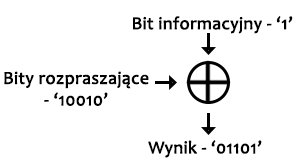
<style>
.page{position:relative;width:297px;height:167px;background:#ffffff}
.page>*{position:absolute;margin:0}
.t1{font:18px "Candara";color:#000000;font-weight:bold}
</style>
<div class="page">
<p class="t1" style="left:133px;top:16px;width:160px;height:18px">Bit informacyjny - ‘1’</p>
<p class="t1" style="left:4px;top:71px;width:145px;height:35px;text-align:center">Bity rozpraszające<br>- ‘10010’</p>
<p class="t1" style="left:148px;top:140px;width:114px;height:18px">Wynik - ‘01101’</p>
</div>
